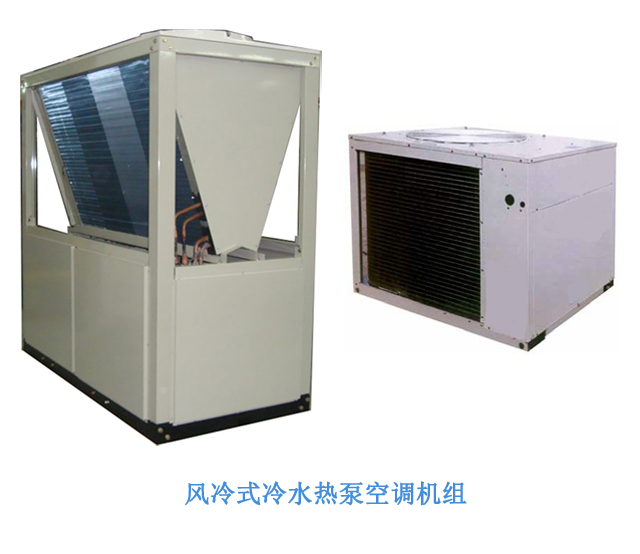
<style>
.page{position:relative;width:640px;height:554px;background:#ffffff}
.page>*{position:absolute;margin:0}
.t1{font:25.1px "SimSun";color:#438edb;font-weight:bold}
</style>
<div class="page">
<p class="t1" style="left:185px;top:481px;width:282px;height:25px">风冷式冷水热泵空调机组</p>
</div>
